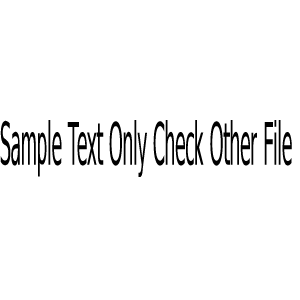
<style>
.page{position:relative;width:300px;height:300px;background:#ffffff}
.page>*{position:absolute;margin:0}
.t1{font:58.7px "Tahoma";color:#000000;scale:0.33 1}
</style>
<div class="page">
<p class="t1" style="left:0px;top:120px;width:292px;height:57px">Sample Text Only Check Other File</p>
</div>
